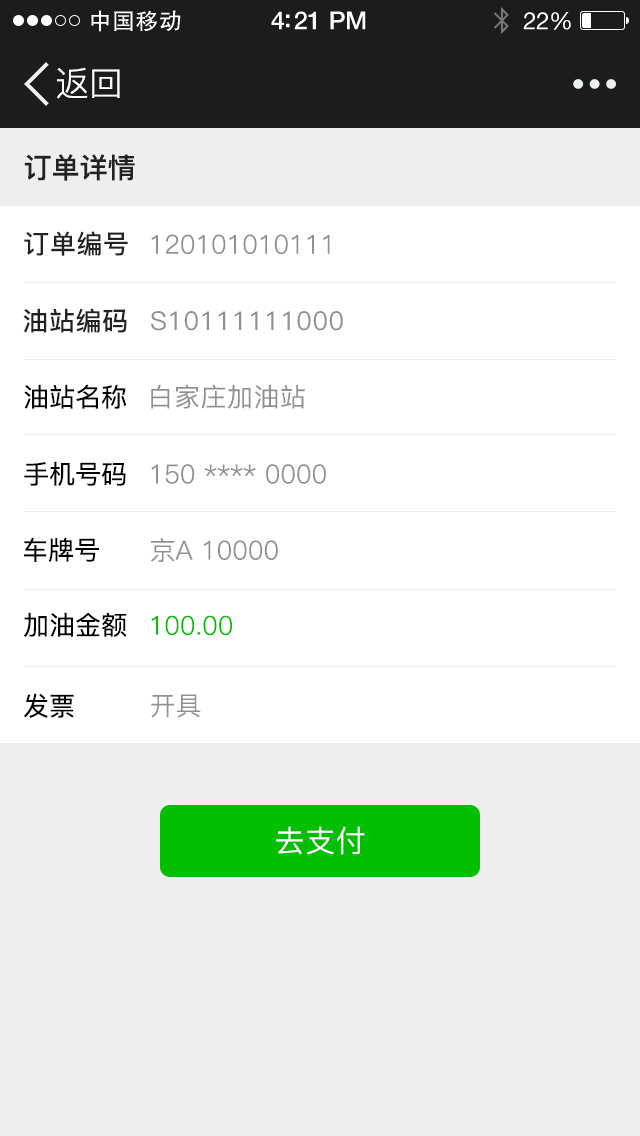
<style>
.page{position:relative;width:640px;height:1136px;background:#ffffff}
.page>*{position:absolute;margin:0}
.t1{font:23px "FZHTK--GBK1-0";letter-spacing:0.02em;color:#ffffff}
.t2{font:25px "HelveticaNeue-Medium";letter-spacing:-0.02em;color:#ffffff}
.t3{font:24px "HelveticaNeue";letter-spacing:-0.02em;color:#ffffff}
.t4{font:34px "PingFang-SC-Regular";color:#ffffff}
.t5{font:28px "PingFang-SC-Bold";color:#222222}
.t6{font:26px "PingFang-SC-Bold";letter-spacing:0.02em;color:#222222}
.t7{font:26px "PingFang-SC-Regular";color:#909090}
.t8{font:26px "PingFang-SC-Medium";letter-spacing:0.02em;color:#909090}
.t9{font:26px "PingFang-SC-Medium";color:#000000}
.t10{font:26px "PingFang-SC-Regular";color:#04be01}
</style>
<div class="page">
<p class="t1" style="left:91px;top:10px;width:90px;height:22px">中国移动</p>
<p class="t2" style="left:271px;top:11px;width:95px;height:19px">4:21 PM</p>
<p class="t3" style="left:523px;top:12px;width:48px;height:18px">22%</p>
<p class="t4" style="left:57px;top:67px;width:63px;height:32px">返回</p>
<p class="t5" style="left:24px;top:154px;width:111px;height:27px">订单详情</p>
<p class="t6" style="left:24px;top:231px;width:104px;height:25px">订单编号</p>
<p class="t7" style="left:151px;top:234px;width:179px;height:20px">120101010111</p>
<p class="t6" style="left:23px;top:308px;width:104px;height:25px">油站编码</p>
<p class="t8" style="left:151px;top:311px;width:192px;height:20px">S10111111000</p>
<p class="t9" style="left:24px;top:384px;width:103px;height:25px">油站名称</p>
<p class="t8" style="left:151px;top:384px;width:154px;height:25px">白家庄加油站</p>
<p class="t9" style="left:24px;top:461px;width:102px;height:25px">手机号码</p>
<p class="t7" style="left:151px;top:464px;width:175px;height:20px">150 **** 0000</p>
<p class="t9" style="left:24px;top:537px;width:75px;height:25px">车牌号</p>
<p class="t7" style="left:151px;top:538px;width:127px;height:24px">京A 10000</p>
<p class="t9" style="left:24px;top:612px;width:103px;height:25px">加油金额</p>
<p class="t10" style="left:151px;top:615px;width:81px;height:21px">100.00</p>
<p class="t9" style="left:24px;top:693px;width:50px;height:25px">发票</p>
<p class="t7" style="left:151px;top:694px;width:50px;height:24px">开具</p>
</div>
